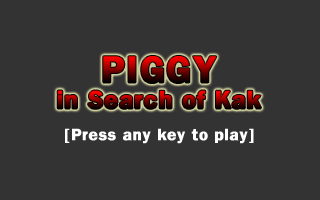
<style>
.page{position:relative;width:320px;height:200px;background:#333333}
.page>*{position:absolute;margin:0}
.t1{font:37.5px "FranklinGothicLT-Demi";letter-spacing:0.025em;font-weight:bold}
.t2{font:25px "FranklinGothicLT-Demi";letter-spacing:0.025em;font-weight:bold}
.t3{font:16.6px "FranklinGothicLT-Demi";letter-spacing:0.025em;color:#ffffff;font-weight:bold}
</style>
<div class="page">
<p class="t1" style="left:103px;top:56px;width:114px;height:27px">PIGGY</p>
<p class="t2" style="left:57px;top:90px;width:204px;height:19px">in Search of Kak</p>
<p class="t3" style="left:65px;top:128px;width:189px;height:16px">[Press any key to play]</p>
</div>
